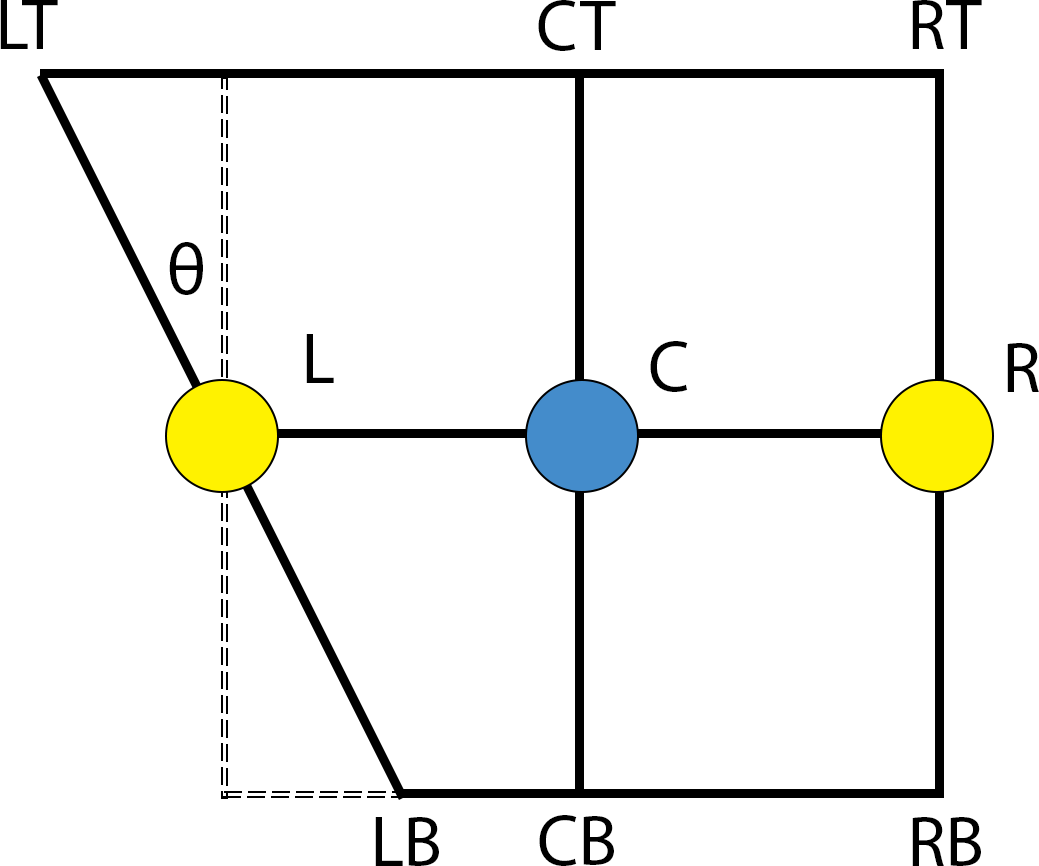
<style>
.page{position:relative;width:1039px;height:866px;background:#ffffff}
.page>*{position:absolute;margin:0}
.t1{font:72px "MyriadPro-Regular";color:#000000}
</style>
<div class="page">
<p class="t1" style="left:0px;top:0px;width:58px;height:49px">LT</p>
<p class="t1" style="left:538px;top:0px;width:78px;height:51px">CT</p>
<p class="t1" style="left:912px;top:0px;width:70px;height:49px">RT</p>
<p class="t1" style="left:169px;top:242px;width:34px;height:53px">θ</p>
<p class="t1" style="left:306px;top:334px;width:28px;height:49px">L</p>
<p class="t1" style="left:650px;top:341px;width:38px;height:51px">C</p>
<p class="t1" style="left:1007px;top:343px;width:32px;height:49px">R</p>
<p class="t1" style="left:375px;top:817px;width:64px;height:49px">LB</p>
<p class="t1" style="left:539px;top:815px;width:75px;height:51px">CB</p>
<p class="t1" style="left:912px;top:817px;width:69px;height:49px">RB</p>
</div>
